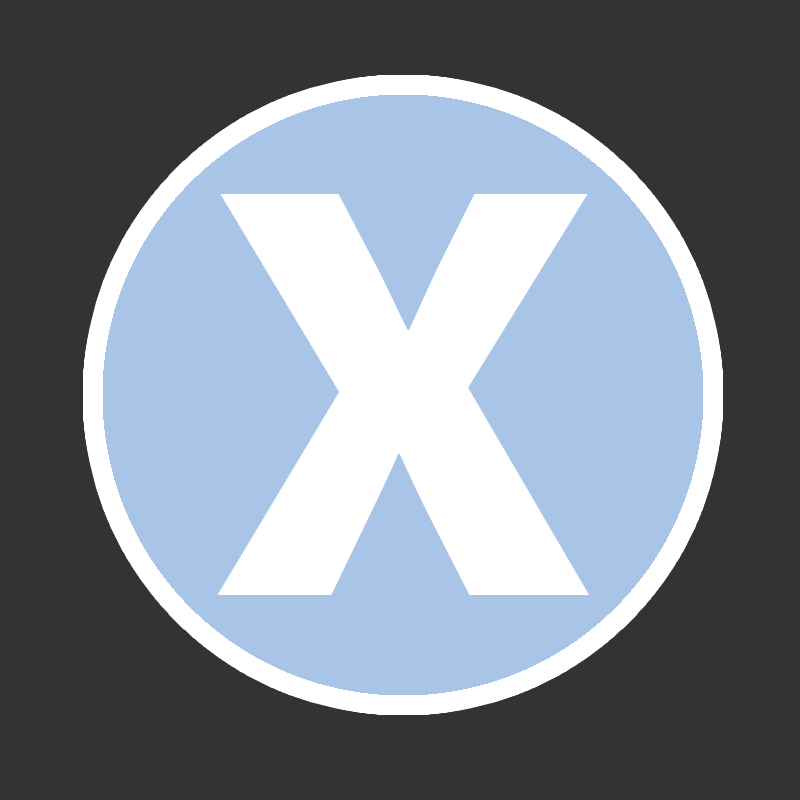
<style>
.page{position:relative;width:800px;height:800px;background:#333333}
.page>*{position:absolute;margin:0}
.t1{font:720.1px "AdobeGothicStd-Bold";color:#ffffff}
</style>
<div class="page">
<p class="t1" style="left:217px;top:194px;width:372px;height:401px">x</p>
</div>
